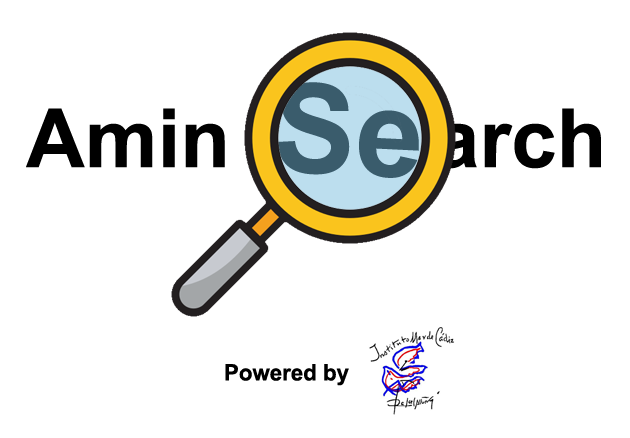
<style>
.page{position:relative;width:630px;height:438px;background:#ffffff}
.page>*{position:absolute;margin:0}
.t1{font:123.9px "Arial-BoldMT";color:#3a5c6c}
.t2{font:81.8px "Arial-BoldMT";color:#000000}
.t3{font:22.7px "Arial-BoldMT";color:#000000}
</style>
<div class="page">
<p class="t1" style="left:277px;top:82px;width:142px;height:96px;rotate:3deg">Se</p>
<p class="t2" style="left:26px;top:108px;width:575px;height:61px">Amin         arch</p>
<p class="t3" style="left:225px;top:364px;width:124px;height:22px">Powered by</p>
</div>
